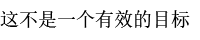
<style>
.page{position:relative;width:200px;height:40px;background:#ffffff}
.page>*{position:absolute;margin:0}
.t1{font:19px "SimSun";color:#000000}
</style>
<div class="page">
<p class="t1" style="left:0px;top:10px;width:190px;height:18px">这不是一个有效的目标</p>
</div>
